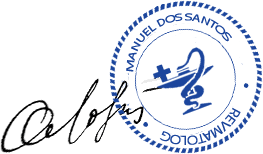
<style>
.page{position:relative;width:263px;height:154px;background:#ffffff}
.page>*{position:absolute;margin:0}
.t1{font:10px "MyriadPro-Regular";color:#1b459c;text-transform:uppercase}
.t2{font:12px "MyriadPro-Regular";color:#1b459c;text-transform:uppercase}
</style>
<div class="page">
<p class="t1" style="left:126px;top:13px;width:106px;height:59px;rotate:-19deg">Manuel dos Santos</p>
<p class="t2" style="left:160px;top:108px;width:81px;height:37px;rotate:161deg">revmatolog</p>
</div>
